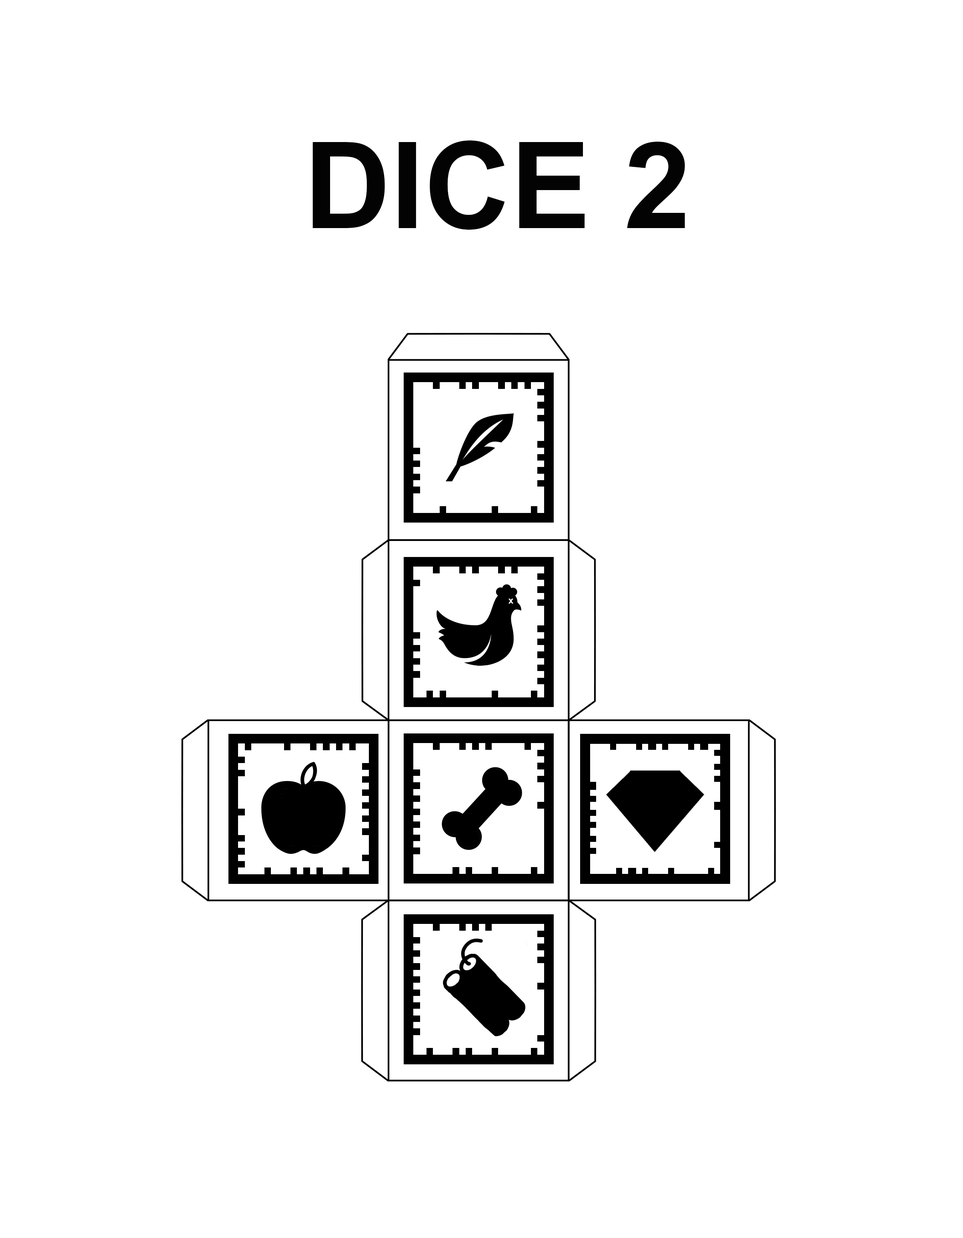
<style>
.page{position:relative;width:963px;height:1238px;background:#ffffff}
.page>*{position:absolute;margin:0}
.t1{font:120px "Arial-BoldMT";color:#030303}
</style>
<div class="page">
<p class="t1" style="left:313px;top:140px;width:372px;height:90px">DICE 2</p>
</div>
